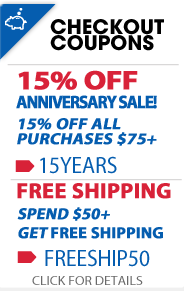
<style>
.page{position:relative;width:184px;height:291px;background:#ffffff}
.page>*{position:absolute;margin:0}
.t1{font:20px "AvantGarde-Bold";color:#000000;text-transform:uppercase}
.t2{font:18px/19px "MyriadPro-Bold";letter-spacing:-0.08em;color:#055daf;text-transform:uppercase;font-weight:bold;scale:0.94 1}
.t3{font:26.7px/19px "MyriadPro-Bold";letter-spacing:-0.025em;color:#d82238;text-transform:uppercase;font-weight:bold;scale:1.15 1}
.t4{font:16px/15px "MyriadPro-Bold";color:#055daf;text-transform:uppercase;font-weight:bold;font-style:italic;scale:1.06 1}
.t5{font:23.6px "MyriadPro-Regular";color:#055daf;text-transform:uppercase;scale:0.91 1}
.t6{font:22px "MyriadPro-Bold";color:#d82238;text-transform:uppercase;font-weight:bold}
.t7{font:20px "MyriadPro-Bold";color:#d82238;text-transform:uppercase;font-weight:bold}
.t8{font:16px/19px "MyriadPro-Bold";color:#055daf;text-transform:uppercase;font-weight:bold;font-style:italic}
.t9{font:16px/19px "MyriadPro-Bold";color:#055daf;text-transform:uppercase;font-weight:bold}
.t10{font:13px "MyriadPro-Regular";color:#696969;text-transform:uppercase;scale:1.06 1}
</style>
<div class="page">
<p class="t1" style="left:50px;top:19px;width:114px;height:16px">Checkout</p>
<p class="t1" style="left:50px;top:35px;width:104px;height:16px">cOUPONS</p>
<p class="t2" style="left:16px;top:70px;width:141px;height:39px"><span class="t3">15% Off <br></span>Anniversary Sale!</p>
<p class="t4" style="left:17px;top:118px;width:140px;height:28px">15% off all <br>purchases $75+</p>
<p class="t5" style="left:40px;top:156px;width:77px;height:18px">15years</p>
<p class="t6" style="left:17px;top:183px;width:154px;height:16px"><span class="t7"><br></span>free shipping</p>
<p class="t8" style="left:17px;top:207px;width:146px;height:32px">Spend $50+<br>get <span class="t9">Free Shipping</span></p>
<p class="t5" style="left:45px;top:249px;width:105px;height:18px">freeship50</p>
<p class="t10" style="left:32px;top:276px;width:111px;height:9px">click for details</p>
</div>
